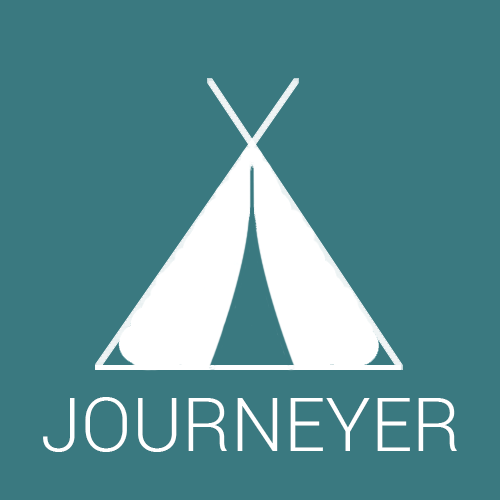
<style>
.page{position:relative;width:500px;height:500px;background:#3a7980}
.page>*{position:absolute;margin:0}
.t1{font:75px "Roboto-Light";color:#ffffff}
</style>
<div class="page">
<p class="t1" style="left:43px;top:397px;width:414px;height:55px">JOURNEYER</p>
</div>
